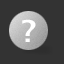
<style>
.page{position:relative;width:64px;height:64px;background:#333333}
.page>*{position:absolute;margin:0}
.t1{font:30px "LucidaGrande-Bold";color:#ffffff}
</style>
<div class="page">
<p class="t1" style="left:22px;top:19px;width:14px;height:23px">?</p>
</div>
